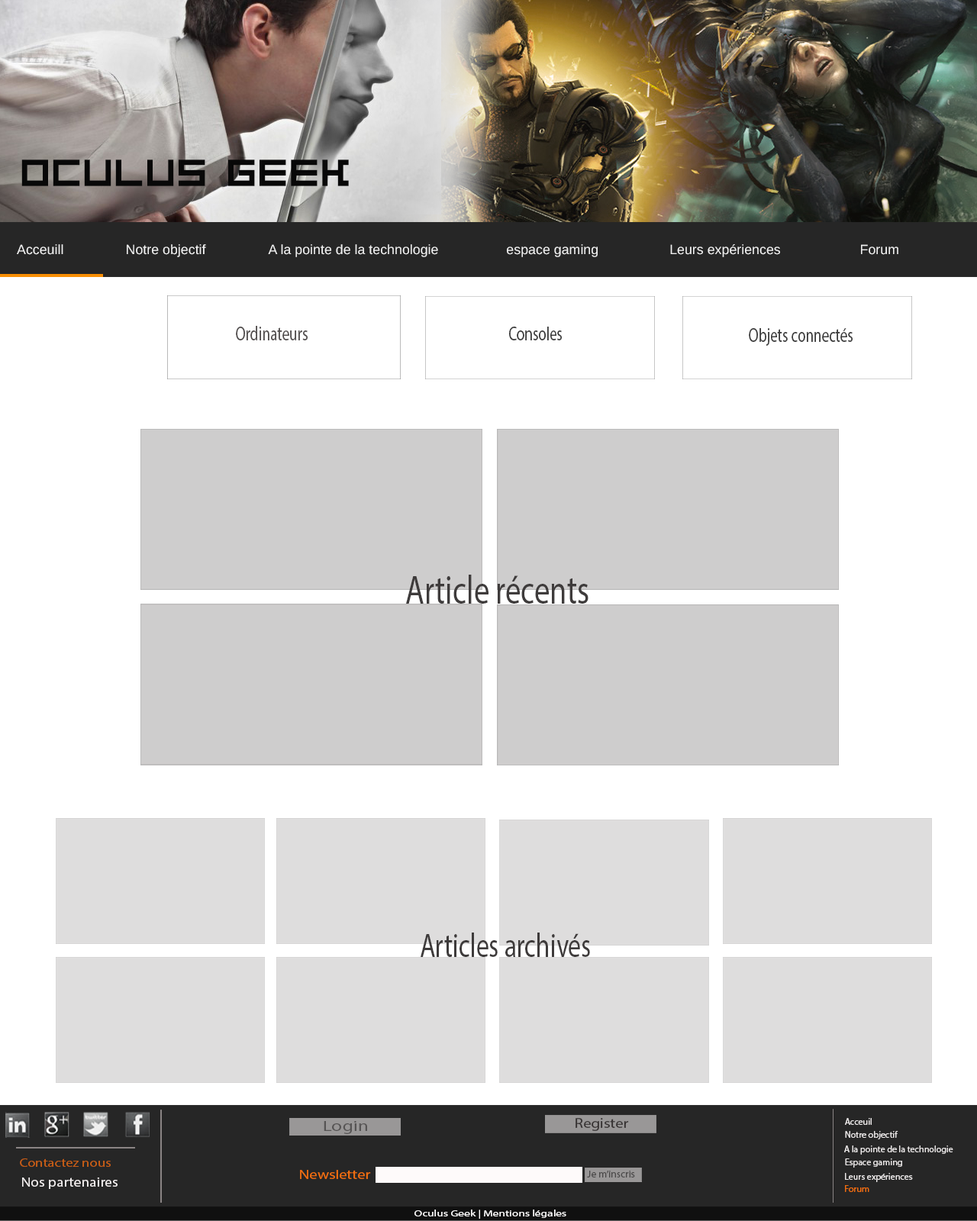
<style>
.page{position:relative;width:977px;height:1221px;background:#ffffff}
.page>*{position:absolute;margin:0}
.t1{font:36.6px "Bit-Trip7-(sRB)";color:#080808}
.t2{font:13.5px "Arimo";color:#f0f0f0}
.t3{font:19.6px "MyriadPro-Regular";color:#4e4a4a;scale:0.75 1}
.t4{font:19.5px "MyriadPro-Regular";color:#3a3a3a;scale:0.74 1}
.t5{font:40.1px "MyriadPro-Regular";color:#3e3b3b;scale:0.77 1}
.t6{font:33.5px "MyriadPro-Regular";color:#3e3b3b;scale:0.76 1}
.t7{font:14.6px "MyriadPro-Regular";color:#565353;scale:1.34 1}
.t8{font:13.9px "MyriadPro-Regular";color:#363232;scale:1.14 1}
.t9{font:9.2px "MyriadPro-Regular";color:#e8e5e5}
.t10{font:12.5px "MyriadPro-Regular";color:#c95e15;scale:1.13 1}
.t11{font:12.8px "MyriadPro-Regular";color:#f36f0e;scale:1.24 1}
.t12{font:13.2px "MyriadPro-Regular";color:#f4f0f0;scale:1.13 1}
.t13{font:10.2px "MyriadPro-Regular";color:#494848}
.t14{font:9.2px "MyriadPro-Regular";color:#ee6d0f}
.t15{font:8.7px "MyriadPro-Regular";color:#fffefe;scale:1.35 1}
</style>
<div class="page">
<p class="t1" style="left:21px;top:159px;width:328px;height:27px">OCULUS GEEK</p>
<p class="t2" style="left:17px;top:244px;width:881px;height:13px">Acceuill   Notre objectif     A la pointe de la technologie   espace gaming   Leurs expériences   Forum</p>
<p class="t3" style="left:236px;top:326px;width:72px;height:14px">Ordinateurs</p>
<p class="t4" style="left:509px;top:327px;width:53px;height:13px">Consoles</p>
<p class="t4" style="left:749px;top:328px;width:103px;height:18px">Objets connectés</p>
<p class="t5" style="left:406px;top:575px;width:182px;height:29px">Article récents</p>
<p class="t6" style="left:420px;top:932px;width:170px;height:25px">Articles archivés</p>
<p class="t7" style="left:324px;top:1121px;width:43px;height:13px">Login</p>
<p class="t8" style="left:575px;top:1118px;width:54px;height:13px">Register</p>
<p class="t9" style="left:845px;top:1118px;width:26px;height:7px">Acceuil</p>
<p class="t9" style="left:845px;top:1131px;width:53px;height:8px">Notre objectif</p>
<p class="t9" style="left:844px;top:1145px;width:109px;height:9px">A la pointe de la technologie</p>
<p class="t10" style="left:20px;top:1158px;width:91px;height:9px">Contactez nous</p>
<p class="t11" style="left:300px;top:1170px;width:71px;height:9px">Newsletter</p>
<p class="t9" style="left:845px;top:1158px;width:57px;height:9px">Espace gaming</p>
<p class="t12" style="left:22px;top:1177px;width:96px;height:12px">Nos partenaires</p>
<p class="t13" style="left:587px;top:1171px;width:48px;height:6px">Je m’inscris</p>
<p class="t9" style="left:845px;top:1173px;width:68px;height:9px">Leurs expériences</p>
<p class="t14" style="left:845px;top:1185px;width:24px;height:7px">Forum</p>
<p class="t15" style="left:414px;top:1209px;width:152px;height:10px">Oculus Geek | Mentions légales</p>
</div>
